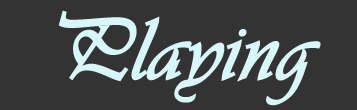
<style>
.page{position:relative;width:357px;height:110px;background:#333333}
.page>*{position:absolute;margin:0}
.t1{font:90px "Vivaldii";color:#daf9fc;font-weight:bold}
</style>
<div class="page">
<p class="t1" style="left:58px;top:10px;width:263px;height:96px">Playing</p>
</div>
